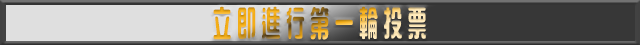
<style>
.page{position:relative;width:640px;height:45px;background:#373737}
.page>*{position:absolute;margin:0}
.t1{font:37.5px "JetLink-MediumRoundArt";letter-spacing:0.2em;scale:0.54 1}
</style>
<div class="page">
<p class="t1" style="left:213px;top:6px;width:213px;height:34px">立即進行第一輪投票</p>
</div>
